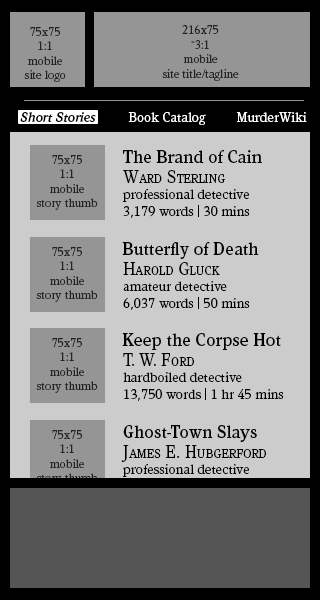
<style>
.page{position:relative;width:320px;height:600px;background:#cccccc}
.page>*{position:absolute;margin:0}
.t1{font:12px "Kandal-Book";color:#222222}
.t2{font:14px "Kandal-Book";color:#ffffff}
.t3{font:14px "Kandal-MediumItalic";color:#000000}
.t4{font:18px "Kandal-Medium";color:#000000}
.t5{font:18px "Kandal-Book";color:#000000;font-variant:small-caps}
.t6{font:14px "Kandal-Book";color:#000000}
</style>
<div class="page">
<p class="t1" style="left:24px;top:27px;width:42px;height:55px;text-align:center">75x75<br>1:1<br>mobile<br>site logo</p>
<p class="t1" style="left:162px;top:24px;width:77px;height:57px;text-align:center">216x75<br>~3:1<br>mobile<br>site title/tagline</p>
<p class="t2" style="left:20px;top:112px;width:287px;height:13px"><span class="t3">Short Stories</span> Book Catalog MurderWiki</p>
<p class="t4" style="left:123px;top:150px;width:139px;height:13px">The Brand of Cain</p>
<p class="t1" style="left:36px;top:155px;width:62px;height:55px;text-align:center">75x75<br>1:1<br>mobile<br>story thumb</p>
<p class="t5" style="left:123px;top:170px;width:103px;height:13px">Ward Sterling</p>
<p class="t6" style="left:122px;top:189px;width:128px;height:29px">professional detective<br>3,179 words | 30 mins</p>
<p class="t4" style="left:122px;top:242px;width:137px;height:17px">Butterfly of Death</p>
<p class="t1" style="left:36px;top:247px;width:62px;height:55px;text-align:center">75x75<br>1:1<br>mobile<br>story thumb</p>
<p class="t5" style="left:123px;top:262px;width:97px;height:13px">Harold Gluck</p>
<p class="t6" style="left:123px;top:281px;width:127px;height:29px">amateur detective<br>6,037 words | 50 mins</p>
<p class="t1" style="left:36px;top:338px;width:62px;height:55px;text-align:center">75x75<br>1:1<br>mobile<br>story thumb</p>
<p class="t4" style="left:122px;top:333px;width:159px;height:17px">Keep the Corpse Hot</p>
<p class="t5" style="left:123px;top:353px;width:71px;height:13px">T. W. Ford</p>
<p class="t6" style="left:123px;top:372px;width:161px;height:29px">hardboiled detective<br>13,750 words | 1 hr 45 mins</p>
<p class="t4" style="left:123px;top:425px;width:134px;height:17px">Ghost-Town Slays</p>
<p class="t1" style="left:36px;top:430px;width:62px;height:55px;text-align:center">75x75<br>1:1<br>mobile<br>story thumb</p>
<p class="t5" style="left:121px;top:445px;width:145px;height:17px">James E. Hubgerford</p>
</div>
